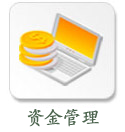
<style>
.page{position:relative;width:125px;height:132px;background:#ffffff}
.page>*{position:absolute;margin:0}
.t1{font:18px "KaiTi_GB2312";color:#4d654f;font-weight:bold}
</style>
<div class="page">
<p class="t1" style="left:27px;top:109px;width:72px;height:18px">资金管理</p>
</div>
